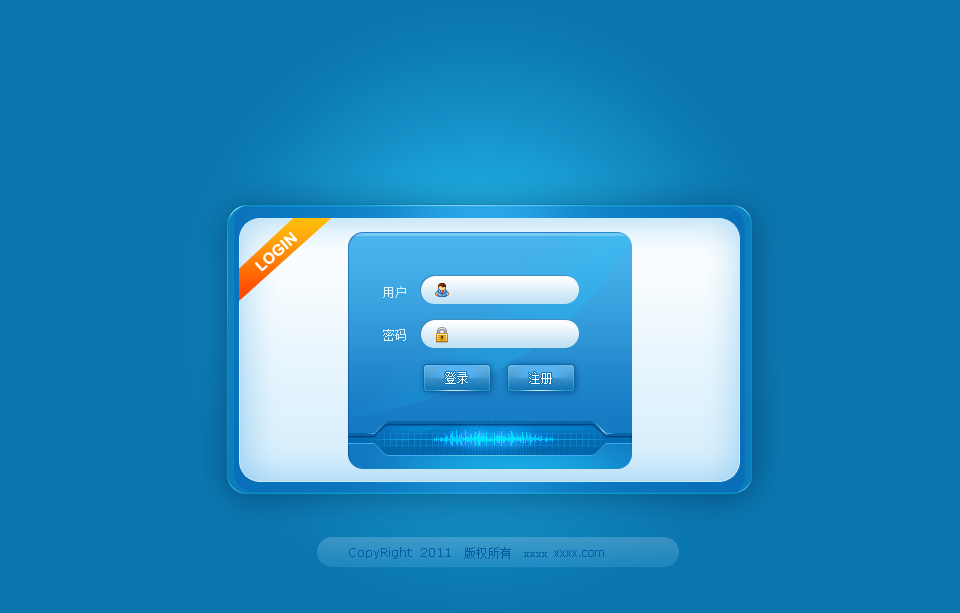
<style>
.page{position:relative;width:960px;height:613px;background:#0a76b0}
.page>*{position:absolute;margin:0}
.t1{font:15.3px "ArialRoundedMTBold";color:#ffffff}
.t2{font:12px "SimSun";color:#dbf2ff}
.t3{font:12px "SimSun";color:#ffffff}
.t4{font:12px "Verdana";color:#025e9e}
.t5{font:12px "SimSun";color:#025e9e}
.t6{font:12px "Tahoma";color:#025e9e}
</style>
<div class="page">
<p class="t1" style="left:255px;top:232px;width:42px;height:40px;rotate:-41deg">LOGIN</p>
<p class="t2" style="left:383px;top:286px;width:23px;height:12px">用户</p>
<p class="t2" style="left:383px;top:329px;width:23px;height:12px">密码</p>
<p class="t3" style="left:445px;top:372px;width:23px;height:12px">登录</p>
<p class="t3" style="left:529px;top:372px;width:23px;height:12px">注册</p>
<p class="t4" style="left:349px;top:547px;width:255px;height:12px">CopyRight  2011<span class="t5">  版权所有  xxxx </span><span class="t6">xxxx.com</span></p>
</div>
